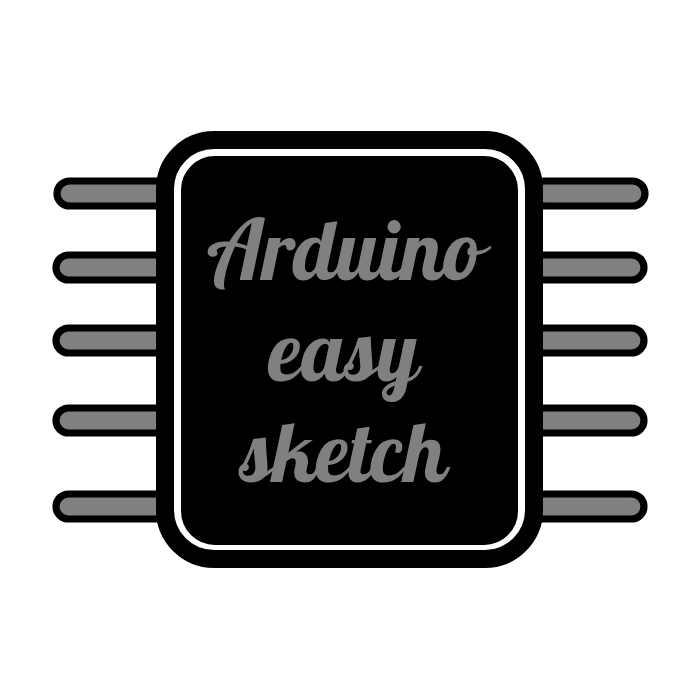
<style>
.page{position:relative;width:700px;height:700px;background:#ffffff}
.page>*{position:absolute;margin:0}
.t1{font:84px "Galada-Regular";color:#808080}
</style>
<div class="page">
<p class="t1" style="left:207px;top:217px;width:285px;height:266px;text-align:center">Arduino easy sketch</p>
</div>
